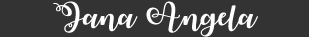
<style>
.page{position:relative;width:309px;height:37px;background:#333333}
.page>*{position:absolute;margin:0}
.t1{font:24.8px "WatermelonScriptDemo";color:#ffffff;scale:1.28 1}
</style>
<div class="page">
<p class="t1" style="left:53px;top:1px;width:205px;height:36px">Jana Angela</p>
</div>
